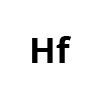
<style>
.page{position:relative;width:100px;height:100px;background:#ffffff}
.page>*{position:absolute;margin:0}
.t1{font:35px "OpenSans-Bold";color:#000000}
</style>
<div class="page">
<p class="t1" style="left:32px;top:36px;width:39px;height:27px">Hf</p>
</div>
